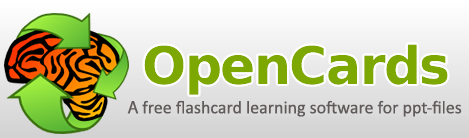
<style>
.page{position:relative;width:469px;height:138px}
.page>*{position:absolute;margin:0}
.t1{font:18px "Calibri";color:#605a5a}
.t2{font:18px "MyriadPro-Regular";color:#605a5a}
</style>
<div class="page">
<p class="t1" style="left:127px;top:100px;width:335px;height:17px"><span class="t2">A </span>free flashcard learning software for ppt-files</p>
</div>
